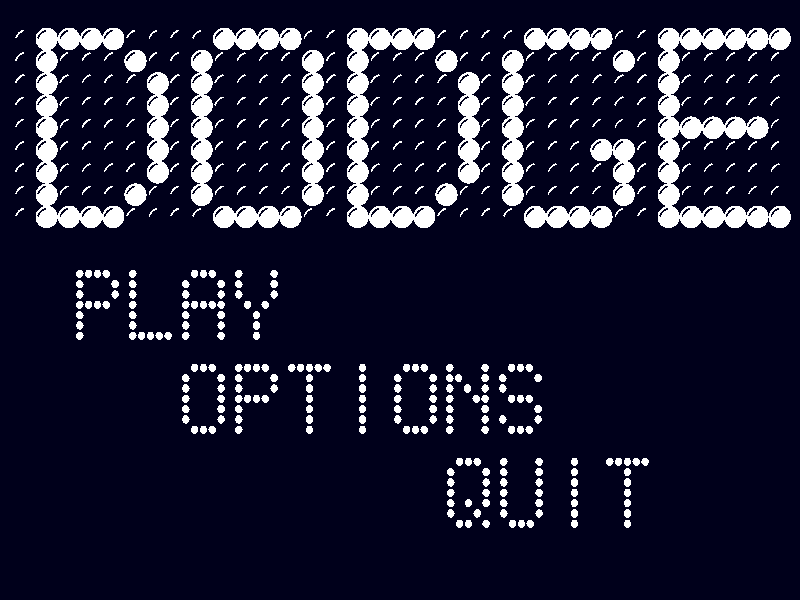
<style>
.page{position:relative;width:800px;height:600px;background:#00001b}
.page>*{position:absolute;margin:0}
.t1{font:200px "LED-BOARD-REVERSED";color:#ffffff}
.t2{font:100px "ScoreBoard";color:#ffffff}
</style>
<div class="page">
<p class="t1" style="left:15px;top:28px;width:776px;height:200px">DODGE</p>
<p class="t2" style="left:76px;top:270px;width:202px;height:70px">PLAY</p>
<p class="t2" style="left:182px;top:364px;width:360px;height:70px">Options</p>
<p class="t2" style="left:447px;top:458px;width:202px;height:70px">QUIT</p>
</div>
